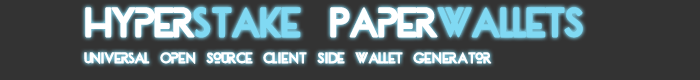
<style>
.page{position:relative;width:700px;height:80px;background:#333333}
.page>*{position:absolute;margin:0}
.t1{font:30px "dionisia-Regular";color:#80d9f3}
.t2{font:30px "dionisia-Regular";color:#ffffff}
.t3{font:11px "dionisia-Regular";color:#ffffff}
</style>
<div class="page">
<p class="t1" style="left:85px;top:7px;width:498px;height:31px"><span class="t2">Hyper</span>stake <span class="t2">Paper</span>WalletS</p>
<p class="t3" style="left:84px;top:52px;width:408px;height:12px">Universal Open Source Client Side Wallet Generator</p>
</div>
